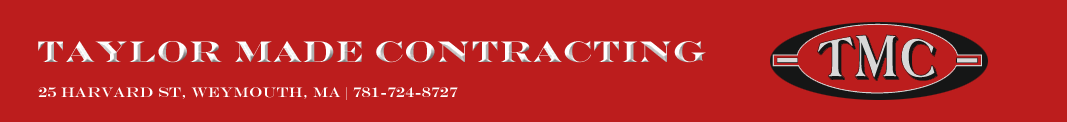
<style>
.page{position:relative;width:1067px;height:122px;background:#bc1d1d}
.page>*{position:absolute;margin:0}
.t1{font:30px "EngraversMT-Bold"}
.t2{font:14px "EngraversMT";color:#ffffff}
</style>
<div class="page">
<p class="t1" style="left:38px;top:41px;width:668px;height:22px">Taylor Made Contracting</p>
<p class="t2" style="left:38px;top:87px;width:420px;height:13px">25 Harvard St, Weymouth, MA | 781-724-8727</p>
</div>
